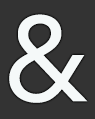
<style>
.page{position:relative;width:95px;height:119px;background:#333333}
.page>*{position:absolute;margin:0}
.t1{font:120px "Avenir-Roman";letter-spacing:0.025em;color:#f5f9f9;text-transform:uppercase}
</style>
<div class="page">
<p class="t1" style="left:9px;top:14px;width:79px;height:89px">&amp;</p>
</div>
